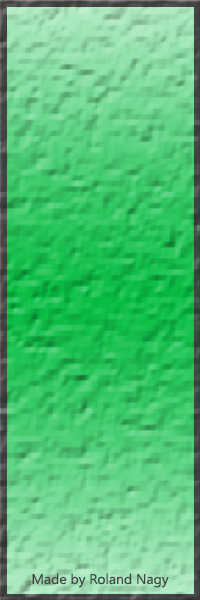
<style>
.page{position:relative;width:200px;height:600px}
.page>*{position:absolute;margin:0}
.t1{font:14px "SegoeUI";color:#444444}
</style>
<div class="page">
<p class="t1" style="left:32px;top:573px;width:137px;height:15px">Made by Roland Nagy</p>
</div>
